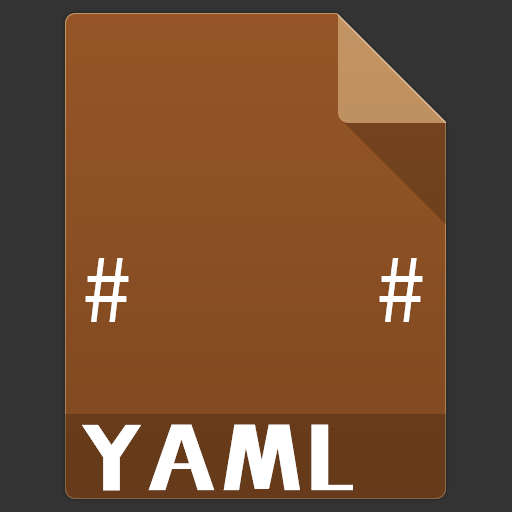
<style>
.page{position:relative;width:512px;height:512px;background:#333333}
.page>*{position:absolute;margin:0}
.t1{font:99px "SourceCodeProYaHeiHybrid";letter-spacing:0.07em;color:#ffffff}
.t2{font:72px "MFLiHei_Noncommercial-Regular";letter-spacing:0.07em;color:#ffffff}
</style>
<div class="page">
<p class="t1" style="left:85px;top:258px;width:338px;height:64px">#    #</p>
<p class="t2" style="left:82px;top:424px;width:271px;height:67px">YAML</p>
</div>
